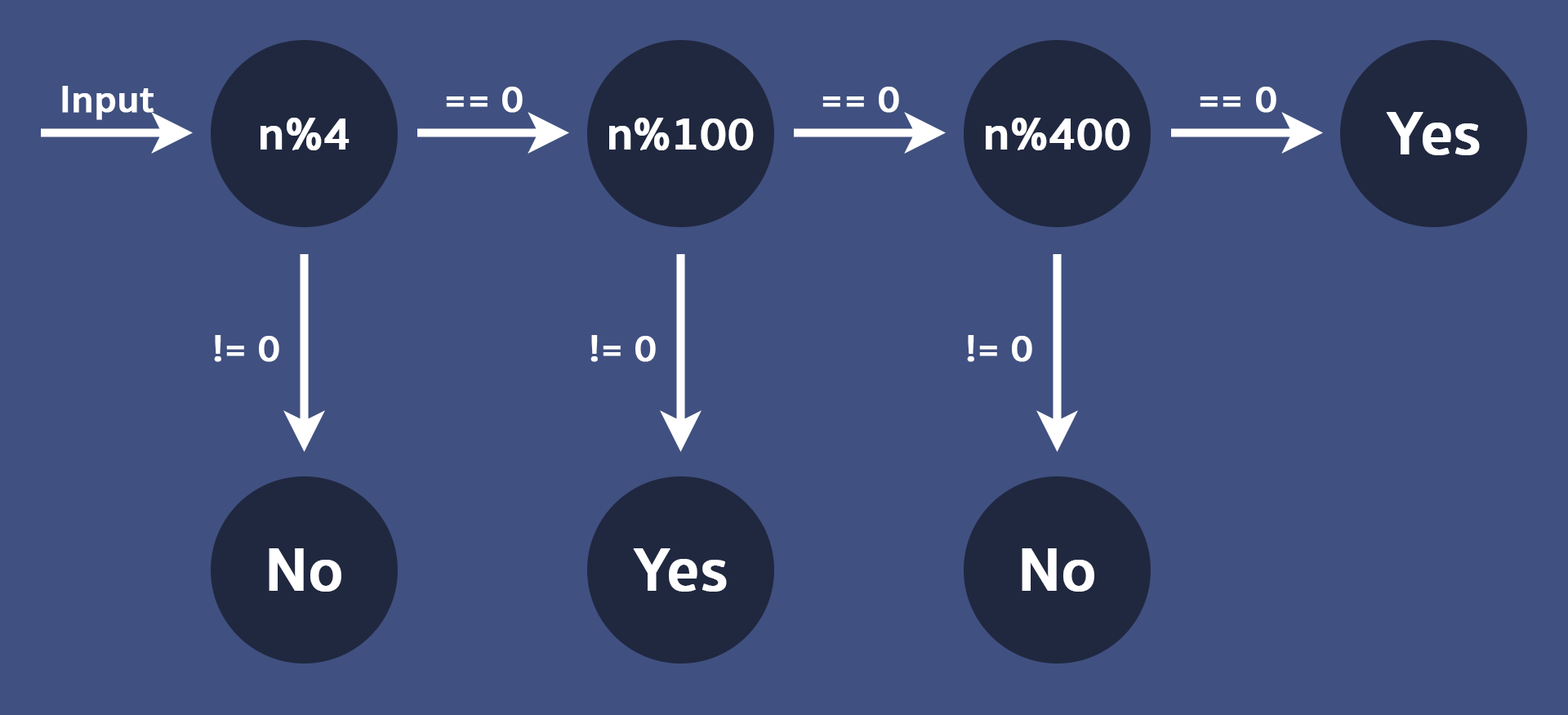
<style>
.page{position:relative;width:1568px;height:715px;background:#405080}
.page>*{position:absolute;margin:0}
.t1{font:38.7px "SukhumvitSet-SemiBold";color:#ffffff;font-weight:bold}
.t2{font:61.9px "SukhumvitSet-SemiBold";color:#ffffff;font-weight:bold}
.t3{font:46.4px "SukhumvitSet-SemiBold";color:#ffffff;font-weight:bold}
</style>
<div class="page">
<p class="t1" style="left:62px;top:86px;width:92px;height:34px">Input</p>
<p class="t1" style="left:446px;top:87px;width:77px;height:26px">== 0</p>
<p class="t1" style="left:822px;top:87px;width:77px;height:26px">== 0</p>
<p class="t1" style="left:1200px;top:87px;width:76px;height:26px">== 0</p>
<p class="t2" style="left:1386px;top:112px;width:94px;height:43px">Yes</p>
<p class="t3" style="left:261px;top:118px;width:89px;height:32px">n%4</p>
<p class="t3" style="left:609px;top:118px;width:145px;height:32px">n%100</p>
<p class="t3" style="left:986px;top:118px;width:144px;height:32px">n%400</p>
<p class="t1" style="left:214px;top:335px;width:65px;height:27px">!= 0</p>
<p class="t1" style="left:590px;top:335px;width:66px;height:27px">!= 0</p>
<p class="t1" style="left:967px;top:335px;width:65px;height:27px">!= 0</p>
<p class="t2" style="left:269px;top:548px;width:72px;height:43px">No</p>
<p class="t2" style="left:633px;top:548px;width:94px;height:43px">Yes</p>
<p class="t2" style="left:1022px;top:548px;width:72px;height:43px">No</p>
</div>
